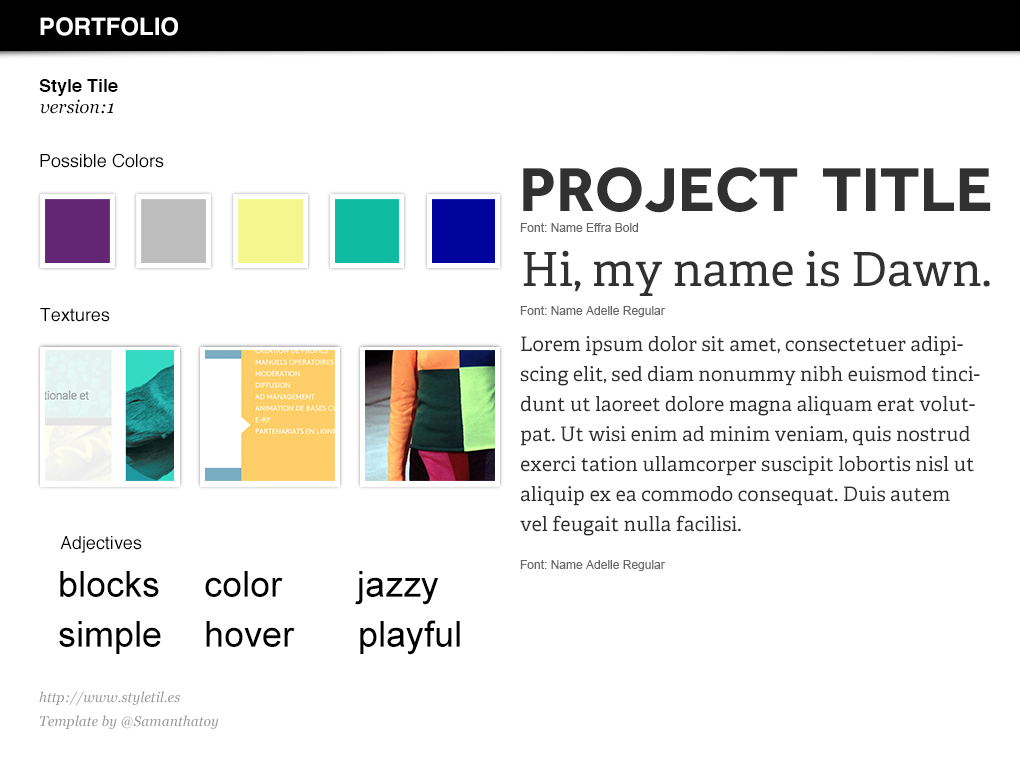
<style>
.page{position:relative;width:1020px;height:760px;background:#ffffff}
.page>*{position:absolute;margin:0}
.t1{font:24px "Helvetica-Bold";color:#ffffff}
.t2{font:18px "Helvetica-Bold";color:#000000}
.t3{font:18px "Georgia-Italic";color:#000000}
.t4{font:18px "Helvetica";color:#000000}
.t5{font:64px "Effra-Bold";color:#323131}
.t6{font:12px "ArialMT";color:#666666}
.t7{font:47px "Adelle-Regular";color:#323131}
.t8{font:20px/30px "Adelle-Regular";color:#2e2e2e}
.t9{font:36px "ArialMT";color:#000000}
.t10{font:14px/24px "Georgia-Italic";color:#999999}
</style>
<div class="page">
<p class="t1" style="left:40px;top:17px;width:138px;height:19px">PORTFOLIO</p>
<p class="t2" style="left:39px;top:79px;width:79px;height:17px">Style Tile</p>
<p class="t3" style="left:40px;top:99px;width:74px;height:15px">version:1</p>
<p class="t4" style="left:40px;top:153px;width:124px;height:15px">Possible Colors</p>
<p class="t5" style="left:523px;top:167px;width:468px;height:46px">PROJECT  TITLE</p>
<p class="t6" style="left:520px;top:223px;width:118px;height:9px">Font: Name Effra Bold</p>
<p class="t7" style="left:523px;top:250px;width:467px;height:46px">Hi, my name is Dawn.</p>
<p class="t4" style="left:40px;top:308px;width:70px;height:14px">Textures</p>
<p class="t6" style="left:520px;top:306px;width:145px;height:11px">Font: Name Adelle Regular</p>
<p class="t8" style="left:520px;top:336px;width:460px;height:200px">Lorem ipsum dolor sit amet, consectetuer adipiscing elit, sed diam nonummy nibh euismod tincidunt ut laoreet dolore magna aliquam erat volutpat. Ut wisi enim ad minim veniam, quis nostrud exerci tation ullamcorper suscipit lobortis nisl ut aliquip ex ea commodo consequat. Duis autem vel feugait nulla facilisi.</p>
<p class="t4" style="left:60px;top:536px;width:82px;height:17px">Adjectives</p>
<p class="t6" style="left:520px;top:560px;width:145px;height:11px">Font: Name Adelle Regular</p>
<p class="t9" style="left:60px;top:571px;width:99px;height:26px">blocks</p>
<p class="t9" style="left:205px;top:571px;width:78px;height:26px">color</p>
<p class="t9" style="left:355px;top:571px;width:84px;height:34px">jazzy</p>
<p class="t9" style="left:59px;top:621px;width:102px;height:33px">simple</p>
<p class="t9" style="left:206px;top:621px;width:89px;height:26px">hover</p>
<p class="t9" style="left:360px;top:620px;width:100px;height:35px">playful</p>
<p class="t10" style="left:39px;top:691px;width:180px;height:38px">http://www.styletil.es<br>Template by @Samanthatoy</p>
</div>
